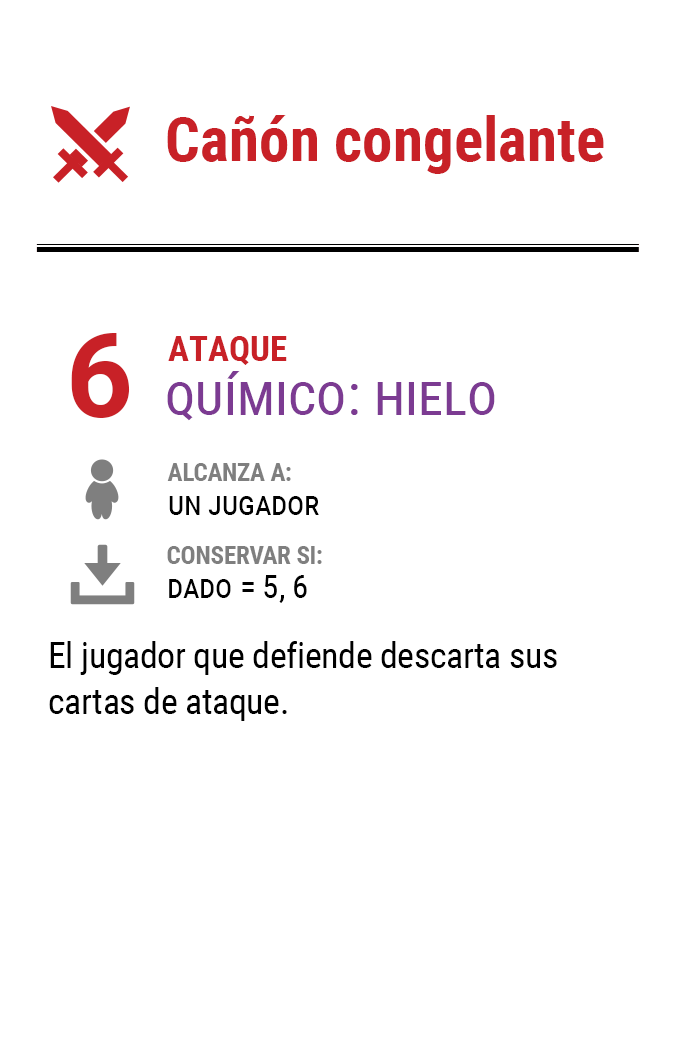
<style>
.page{position:relative;width:675px;height:1050px;background:#ffffff}
.page>*{position:absolute;margin:0}
.t1{font:61.2px "RobotoCondensed-Bold";color:#c82127}
.t2{font:116.7px "Roboto-Bold";letter-spacing:-0.16em;color:#c82127}
.t3{font:35px "RobotoCondensed-Bold";color:#c82127}
.t4{font:58.3px "RobotoCondensed-Regular";color:#7c3b92;font-variant:small-caps}
.t5{font:25px/33.3px "RobotoCondensed-Bold";letter-spacing:-0.01em;color:#7f7f7f}
.t6{font:33.3px/33.3px "RobotoCondensed-Regular";letter-spacing:-0.01em;color:#000000;font-variant:small-caps}
.t7{font:35.8px/45.8px "RobotoCondensed-Regular";letter-spacing:-0.01em;color:#000000}
</style>
<div class="page">
<p class="t1" style="left:167px;top:115px;width:437px;height:59px">Cañón congelante</p>
<p class="t2" style="left:71px;top:333px;width:59px;height:85px">6</p>
<p class="t3" style="left:168px;top:336px;width:119px;height:29px">ATAQUE</p>
<p class="t4" style="left:167px;top:371px;width:328px;height:50px">químico: hielo</p>
<p class="t5" style="left:167px;top:463px;width:152px;height:52px">ALCANZA A:<br><span class="t6">un jugador</span></p>
<p class="t5" style="left:167px;top:546px;width:155px;height:57px">CONSERVAR SI:<br><span class="t6">dado = 5, 6</span></p>
<p class="t7" style="left:49px;top:641px;width:508px;height:80px">El jugador que defiende descarta sus cartas de ataque.</p>
</div>
